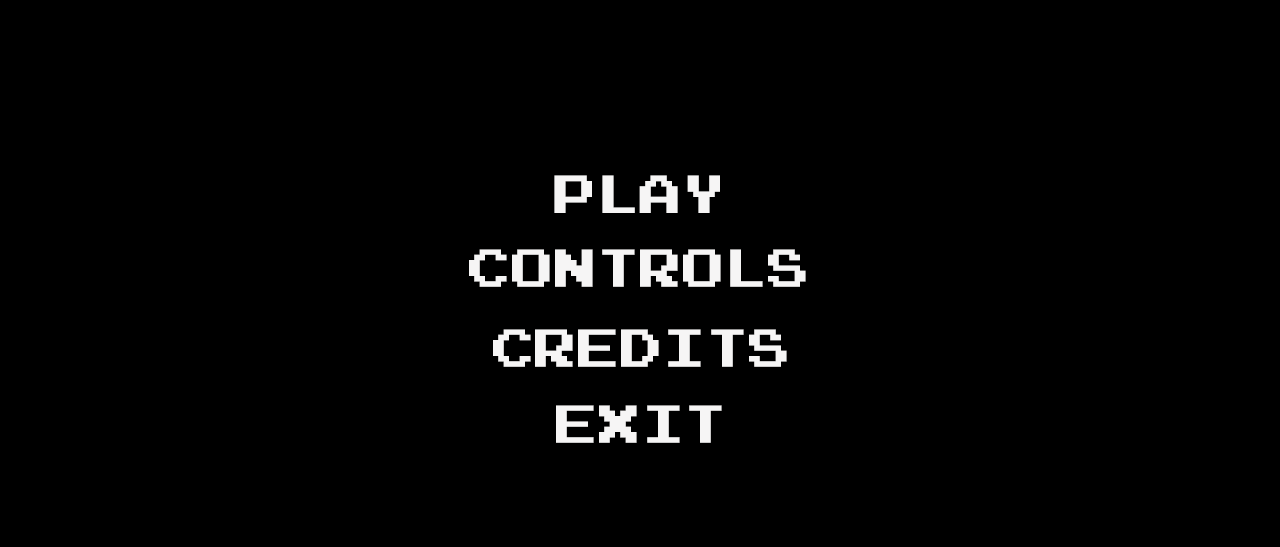
<style>
.page{position:relative;width:1280px;height:547px;background:#000000}
.page>*{position:absolute;margin:0}
.t1{font:42.6px "PressStart2P";color:#f6f5f5}
</style>
<div class="page">
<p class="t1" style="left:554px;top:175px;width:166px;height:38px">PLAY</p>
<p class="t1" style="left:469px;top:249px;width:337px;height:38px">CONTROLS</p>
<p class="t1" style="left:493px;top:329px;width:294px;height:38px">CREDITS</p>
<p class="t1" style="left:556px;top:405px;width:166px;height:38px">EXIT</p>
</div>
